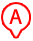
<style>
.page{position:relative;width:33px;height:41px;background:#ffffff}
.page>*{position:absolute;margin:0}
.t1{font:21.5px "MyriadPro-Regular";color:#ff0000}
</style>
<div class="page">
<p class="t1" style="left:9px;top:9px;width:13px;height:15px">A</p>
</div>
